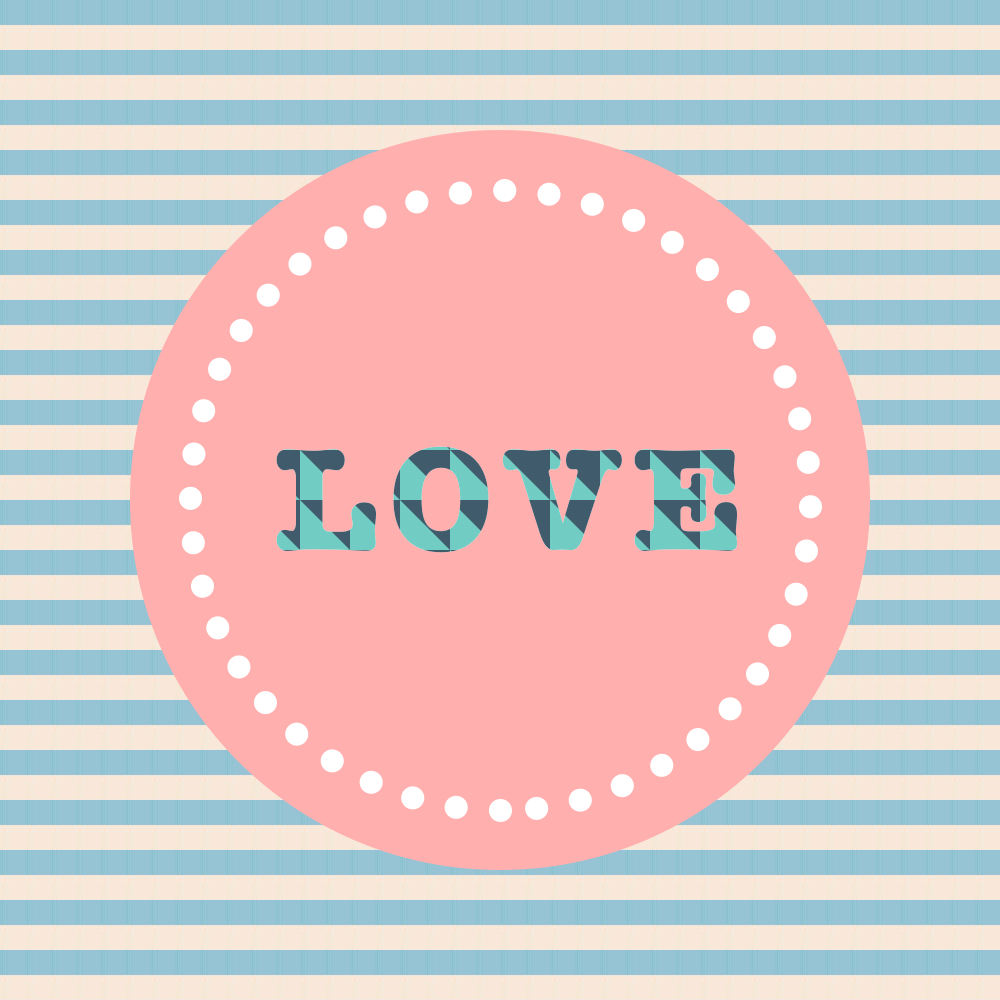
<style>
.page{position:relative;width:1000px;height:1000px;background:#ffafae}
.page>*{position:absolute;margin:0}
.t1{font:150px "AmericanTypewriter-Bold";letter-spacing:0.08em}
</style>
<div class="page">
<p class="t1" style="left:276px;top:446px;width:461px;height:107px">LOVE</p>
</div>
